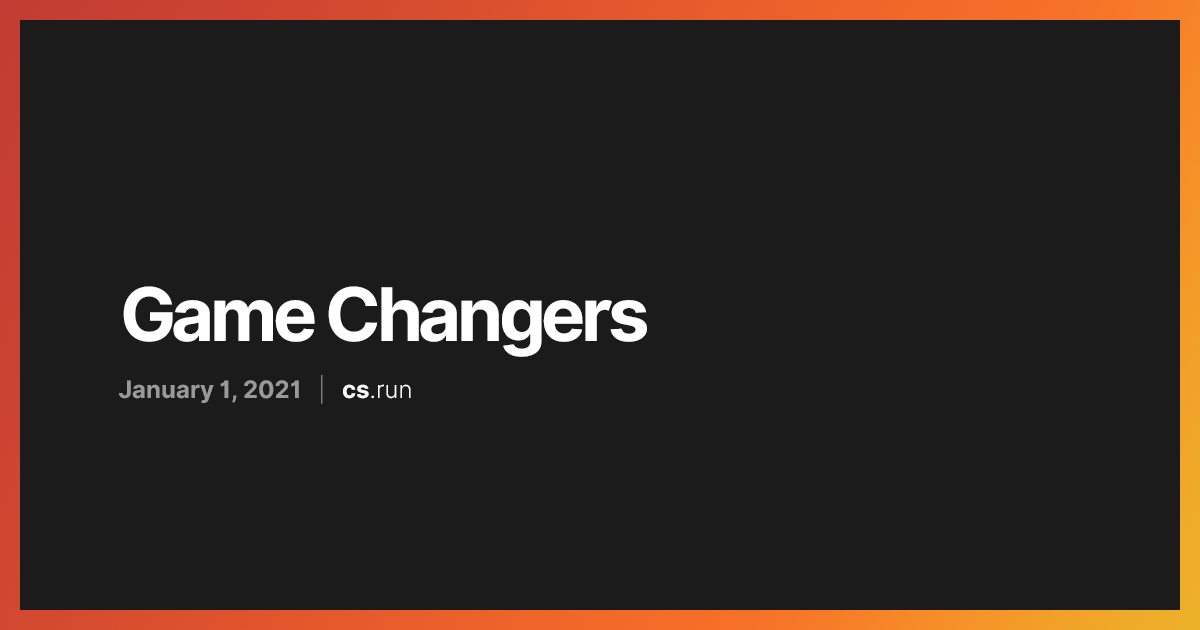
<style>
.page{position:relative;width:1200px;height:630px;background:#1b1b1c}
.page>*{position:absolute;margin:0}
.t1{font:74px "Inter-Bold";letter-spacing:-0.06em;color:#ffffff}
.t2{font:24px "Inter-Bold";color:#99999a}
.t3{font:24px "Inter-LightBETA";color:#99999a}
.t4{font:24px "Inter-Bold";color:#fefefe}
.t5{font:24px "Inter-LightBETA";color:#fefefe}
</style>
<div class="page">
<p class="t1" style="left:123px;top:286px;width:524px;height:71px">Game Changers</p>
<p class="t2" style="left:119px;top:375px;width:292px;height:29px">January 1, 2021   <span class="t3">|   </span><span class="t4">cs</span><span class="t5">.run</span></p>
</div>
